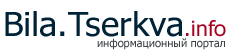
<style>
.page{position:relative;width:230px;height:50px;background:#ffffff}
.page>*{position:absolute;margin:0}
.t1{font:33px "Tahoma";color:#002236;scale:1.05 1}
.t2{font:21px "Tahoma";color:#a60322;scale:1.05 1}
.t3{font:11px "Tahoma";color:#3d4144}
</style>
<div class="page">
<p class="t1" style="left:5px;top:11px;width:221px;height:26px">Bila.Tserkva<span class="t2">.info</span></p>
<p class="t3" style="left:97px;top:38px;width:128px;height:12px">информационный портал</p>
</div>
